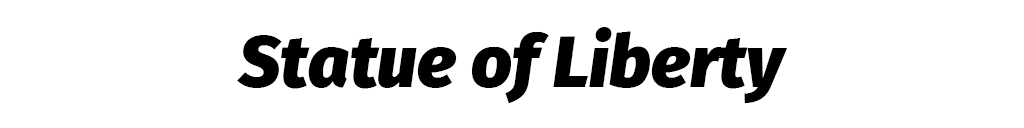
<style>
.page{position:relative;width:1024px;height:128px;background:#ffffff}
.page>*{position:absolute;margin:0}
.t1{font:71.8px "FiraSans-BlackItalic";color:#000000}
</style>
<div class="page">
<p class="t1" style="left:237px;top:27px;width:551px;height:77px">Statue of Liberty</p>
</div>
